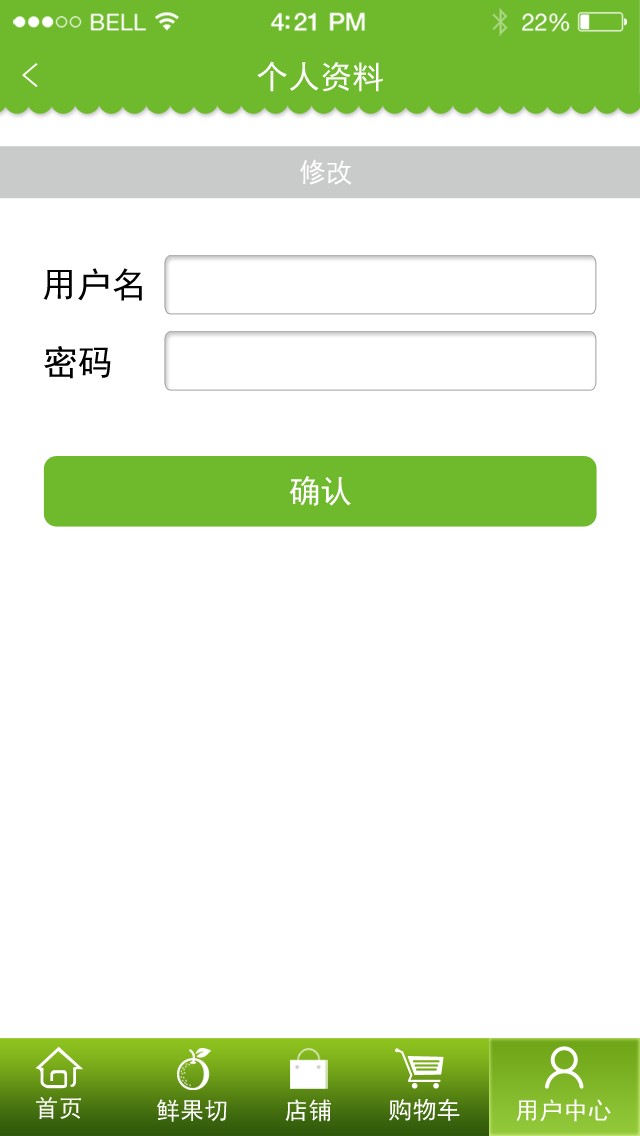
<style>
.page{position:relative;width:640px;height:1136px;background:#ffffff}
.page>*{position:absolute;margin:0}
.t1{font:33.8px "SimHei";color:#ffffff;scale:1.07 1}
.t2{font:32px "SimHei";color:#ffffff}
.t3{font:26.7px "SimHei";color:#ffffff}
.t4{font:35px "SimHei";color:#000000}
.t5{font:24.1px "SimHei";color:#ffffff}
</style>
<div class="page">
<p class="t1" style="left:22px;top:63px;width:16px;height:24px;rotate:180deg">&gt;</p>
<p class="t2" style="left:257px;top:61px;width:126px;height:31px">个人资料</p>
<p class="t3" style="left:300px;top:159px;width:52px;height:26px">修改</p>
<p class="t4" style="left:43px;top:268px;width:99px;height:33px">用户名</p>
<p class="t4" style="left:44px;top:346px;width:67px;height:33px">密码</p>
<p class="t2" style="left:289px;top:476px;width:62px;height:30px">确认</p>
<p class="t5" style="left:36px;top:1096px;width:45px;height:23px">首页</p>
<p class="t5" style="left:157px;top:1099px;width:70px;height:23px">鲜果切</p>
<p class="t5" style="left:285px;top:1099px;width:46px;height:23px">店铺</p>
<p class="t5" style="left:389px;top:1098px;width:71px;height:23px">购物车</p>
<p class="t5" style="left:516px;top:1099px;width:95px;height:23px">用户中心</p>
</div>
